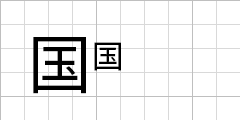
<style>
.page{position:relative;width:240px;height:120px;background:#ffffff}
.page>*{position:absolute;margin:0}
.t1{font:64px "NotoSansCJKjp-Regular";color:#000000}
.t2{font:32px "NotoSansCJKjp-Regular";color:#000000}
</style>
<div class="page">
<p class="t1" style="left:33px;top:37px;width:88px;height:57px">国<span class="t2">国</span></p>
</div>
